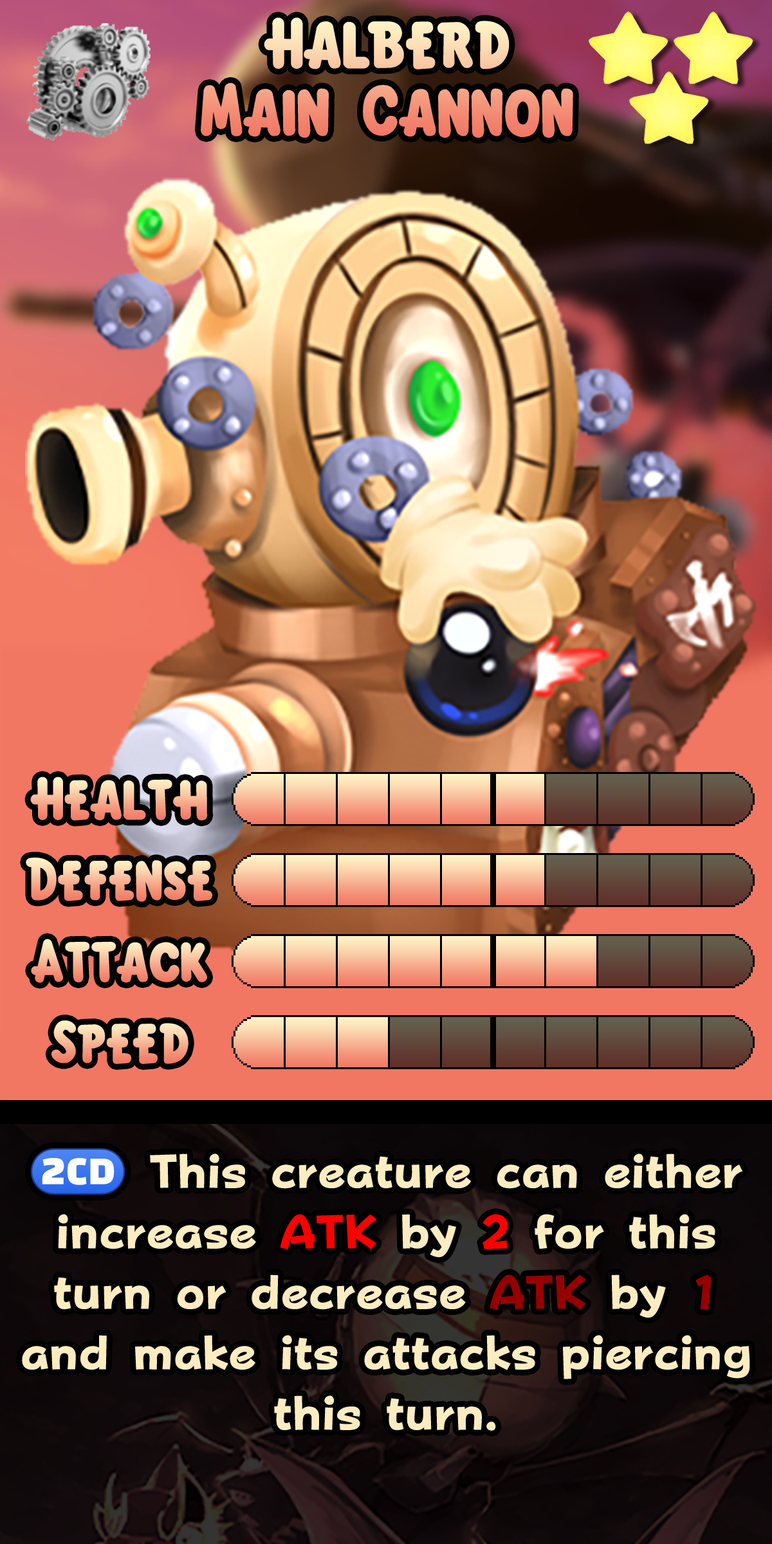
<style>
.page{position:relative;width:772px;height:1544px}
.page>*{position:absolute;margin:0}
.t1{font:110px/67.6px "KirbyClassic"}
.t2{font:92.7px "KirbyClassic"}
.t3{font:81.1px/60.5px "FOTPopHappinessStrp-ExtraBold";color:#feecc1}
.t4{font:81.1px/60.5px "stoogedings-Regular";color:#feecc1}
.t5{font:81.1px/60.5px "FOTPopHappinessStrp-ExtraBold";color:#ff0000}
.t6{font:81.1px/60.5px "FOTPopHappinessStrp-ExtraBold";color:#fd0000}
.t7{font:81.1px/60.5px "FOTPopHappinessStrp-ExtraBold";color:#960000}
</style>
<div class="page">
<p class="t1" style="left:201px;top:17px;width:372px;height:121px;text-align:center">Halberd<br>Main Cannon</p>
<p class="t2" style="left:30px;top:777px;width:178px;height:44px">Health</p>
<p class="t2" style="left:26px;top:858px;width:186px;height:44px">Defense</p>
<p class="t2" style="left:31px;top:939px;width:176px;height:44px">Attack</p>
<p class="t2" style="left:51px;top:1021px;width:138px;height:43px">Speed</p>
<p class="t3" style="left:22px;top:1148px;width:728px;height:283px;text-align:center"><span class="t4">(2CD)</span> This creature can either increase<span class="t5"> ATK</span> by <span class="t6">2</span> for this turn or decrease<span class="t7"> ATK</span> by <span class="t7">1</span> and make its attacks piercing this turn.</p>
</div>
